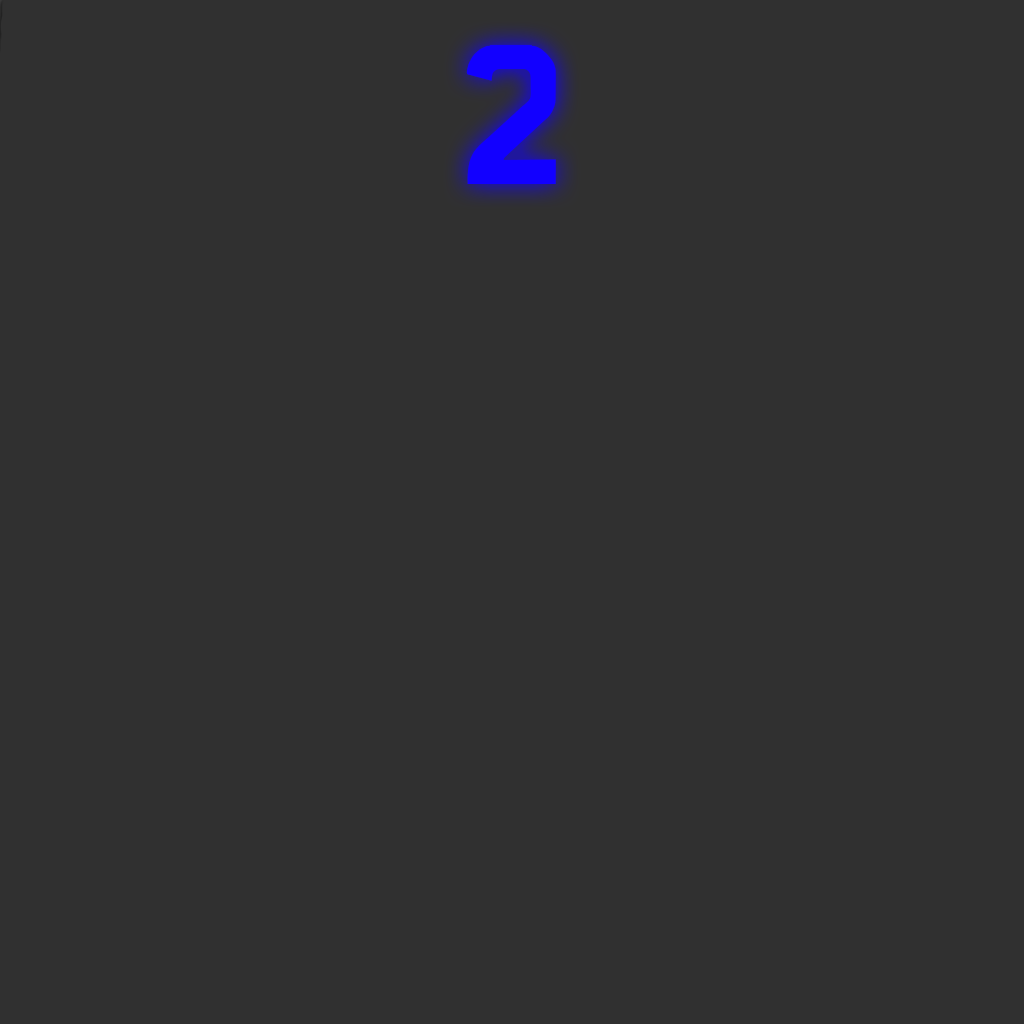
<style>
.page{position:relative;width:1024px;height:1024px;background:#303030}
.page>*{position:absolute;margin:0}
.t1{font:203.8px "UKNumberPlate";color:#1200ff}
</style>
<div class="page">
<p class="t1" style="left:466px;top:44px;width:90px;height:140px">2</p>
</div>
